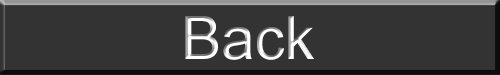
<style>
.page{position:relative;width:500px;height:75px;background:#333333}
.page>*{position:absolute;margin:0}
.t1{font:60px "ArialMT"}
</style>
<div class="page">
<p class="t1" style="left:185px;top:16px;width:129px;height:44px">Back</p>
</div>
